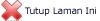
<style>
.page{position:relative;width:100px;height:21px;background:#ffffff}
.page>*{position:absolute;margin:0}
.t1{font:8.8px "Verdana"}
</style>
<div class="page">
<p class="t1" style="left:25px;top:7px;width:71px;height:9px">Tutup Laman Ini</p>
</div>
